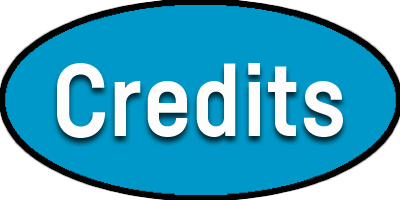
<style>
.page{position:relative;width:400px;height:200px;background:#0098c8}
.page>*{position:absolute;margin:0}
.t1{font:100px "Fabrikat-Bold";letter-spacing:0.01em;color:#fdfdfd}
</style>
<div class="page">
<p class="t1" style="left:57px;top:63px;width:286px;height:75px">Credits</p>
</div>
